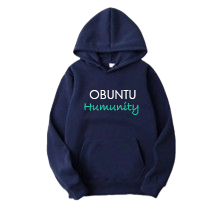
<style>
.page{position:relative;width:200px;height:220px;background:#ffffff}
.page>*{position:absolute;margin:0}
.t1{font:12px "BradleyHandITC";color:#1fcea7}
.t2{font:12px "CenturyGothic";color:#ffffff}
</style>
<div class="page">
<p class="t1" style="left:84px;top:101px;width:55px;height:14px">Humunity</p>
<p class="t2" style="left:89px;top:90px;width:47px;height:9px">OBUNTU</p>
</div>
